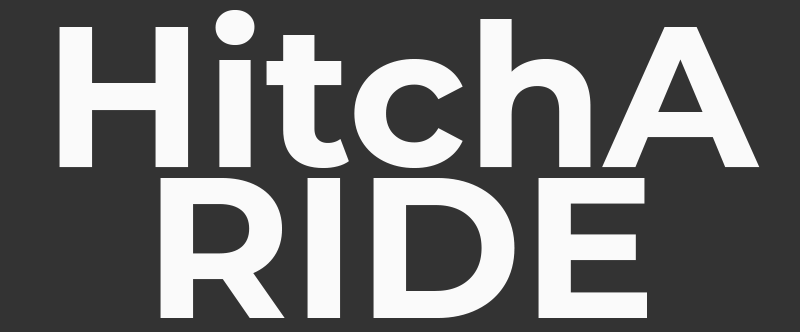
<style>
.page{position:relative;width:800px;height:332px;background:#333333}
.page>*{position:absolute;margin:0}
.t1{font:200px/151px "Montserrat-Bold";color:#fafafa}
</style>
<div class="page">
<p class="t1" style="left:59px;top:10px;width:701px;height:308px;text-align:center">HitchA<br>RIDE</p>
</div>
